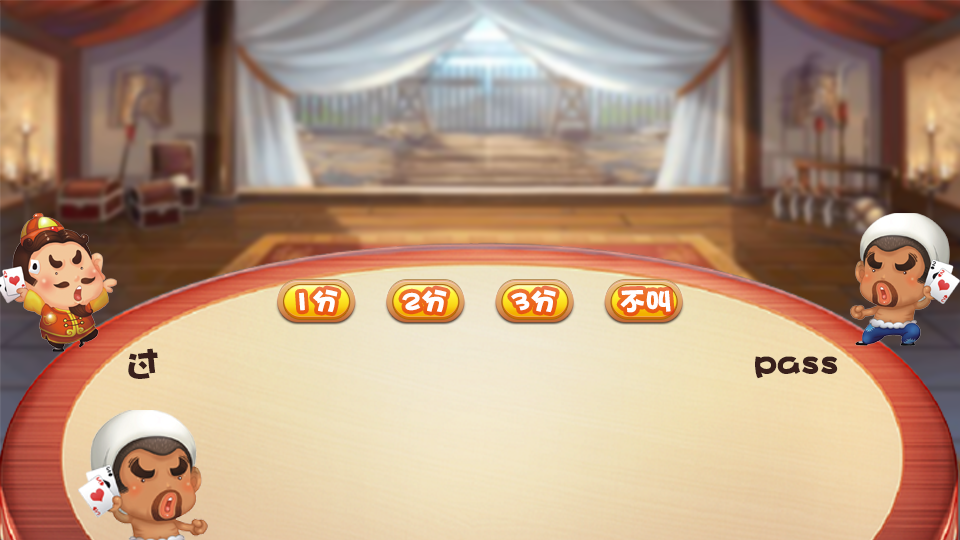
<style>
.page{position:relative;width:960px;height:540px}
.page>*{position:absolute;margin:0}
.t1{font:26.2px "DFPHaiBaoW12";color:#fffefe}
.t2{font:34px "DFPHaiBaoW12";color:#39201c}
</style>
<div class="page">
<p class="t1" style="left:299px;top:289px;width:39px;height:24px">1分</p>
<p class="t1" style="left:402px;top:289px;width:45px;height:24px">2分</p>
<p class="t1" style="left:511px;top:289px;width:45px;height:24px">3分</p>
<p class="t1" style="left:620px;top:290px;width:51px;height:23px">不叫</p>
<p class="t2" style="left:128px;top:348px;width:30px;height:31px">过</p>
<p class="t2" style="left:755px;top:356px;width:83px;height:23px">pass</p>
</div>
